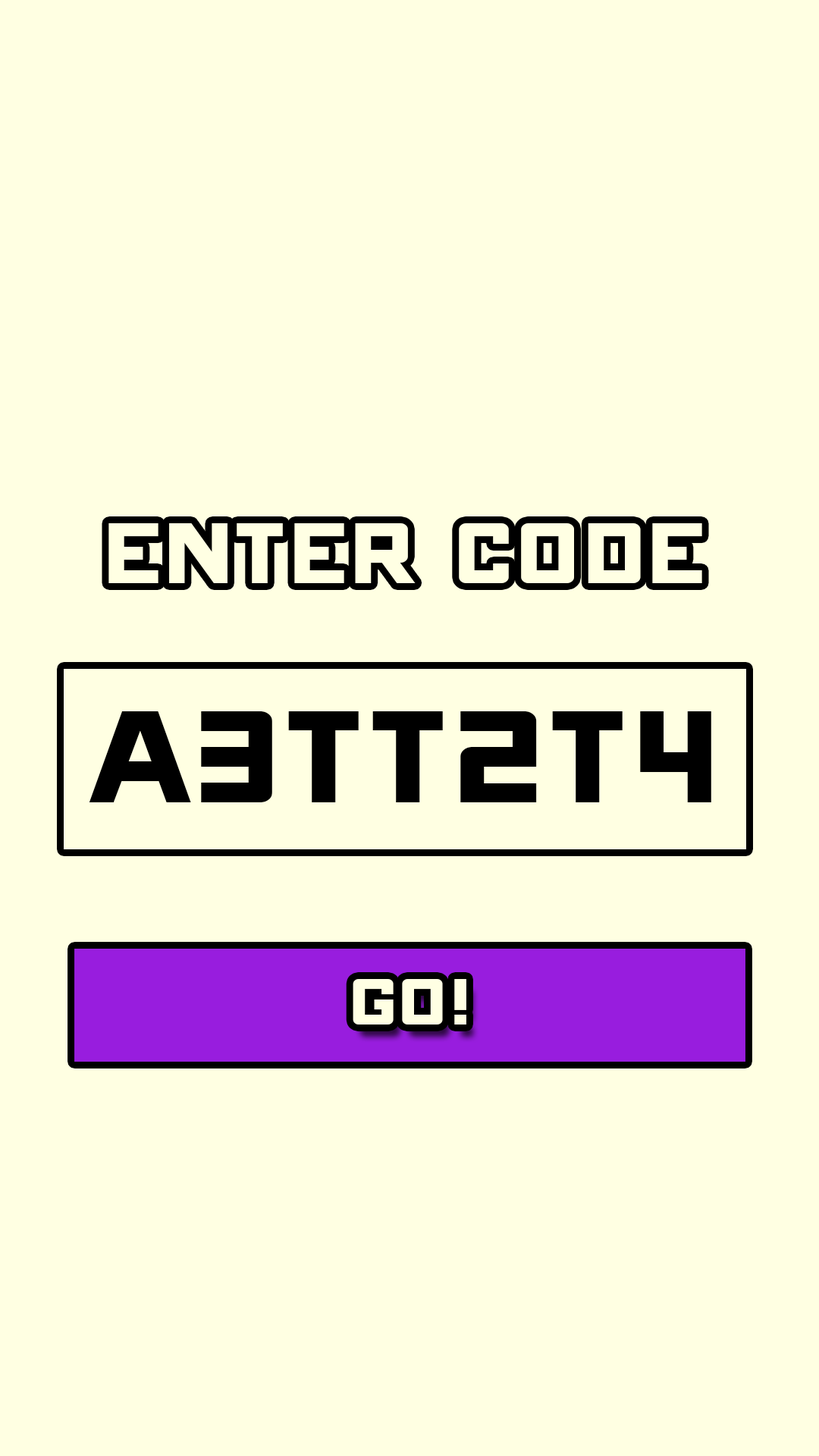
<style>
.page{position:relative;width:819px;height:1456px;background:#ffffe2}
.page>*{position:absolute;margin:0}
.t1{font:136.5px "ONRAMP";color:#ffffe3;scale:1.1 1}
.t2{font:208.5px "ONRAMP";color:#000000;scale:1.1 1}
.t3{font:103.6px "ONRAMP";color:#ffffe3;scale:1.1 1}
</style>
<div class="page">
<p class="t1" style="left:108px;top:523px;width:594px;height:60px">Enter Code</p>
<p class="t2" style="left:89px;top:711px;width:622px;height:91px">a3tt2t4</p>
<p class="t3" style="left:353px;top:979px;width:113px;height:45px">go!</p>
</div>
